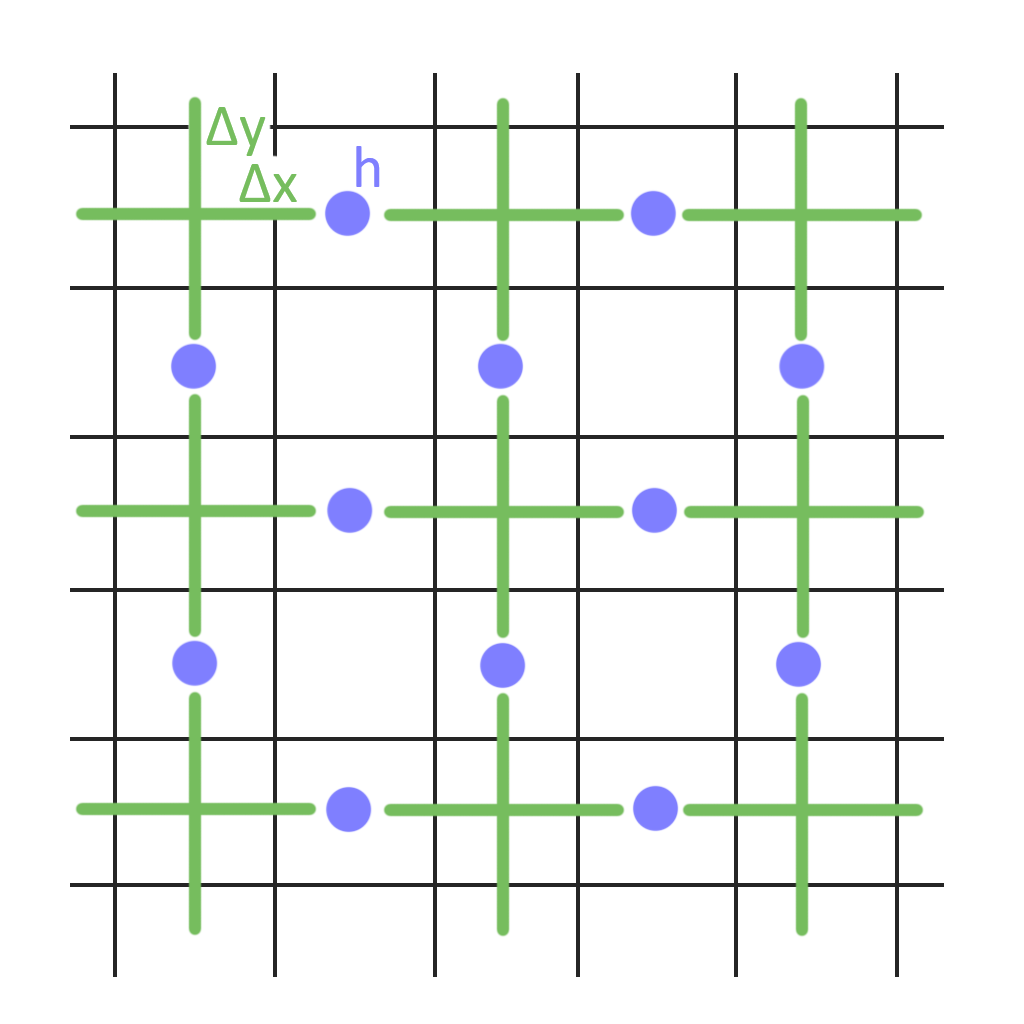
<style>
.page{position:relative;width:1024px;height:1024px;background:#ffffff}
.page>*{position:absolute;margin:0}
.t1{font:60px "Calibri";color:#76bd5e}
.t2{font:60px "Calibri";color:#7f7fff}
</style>
<div class="page">
<p class="t1" style="left:206px;top:107px;width:60px;height:49px">Δy</p>
<p class="t2" style="left:356px;top:146px;width:24px;height:41px">h</p>
<p class="t1" style="left:239px;top:164px;width:58px;height:38px">Δx</p>
</div>
